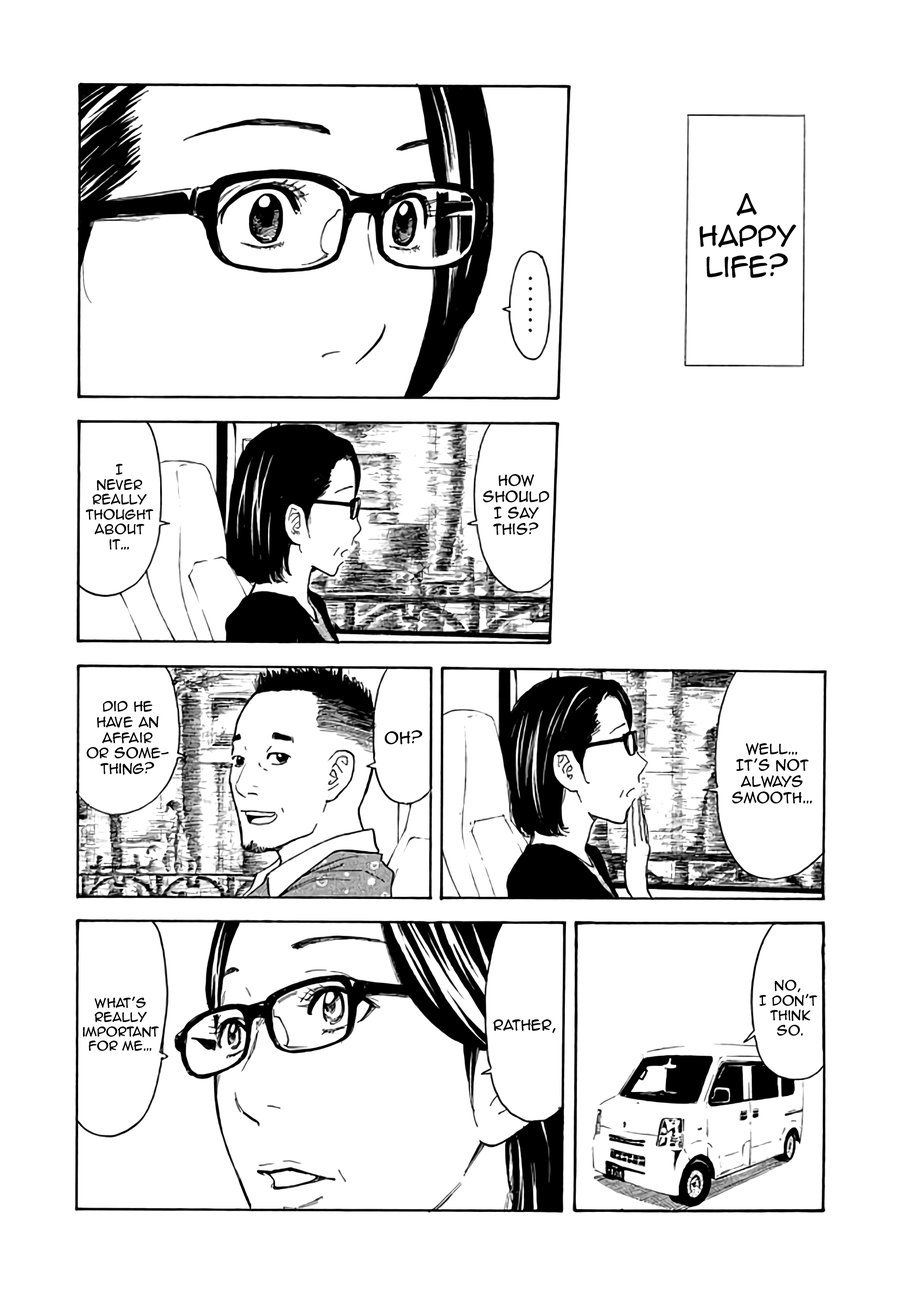
<style>
.page{position:relative;width:916px;height:1302px;background:#ffffff}
.page>*{position:absolute;margin:0}
.t1{font:26px "AnimeAce2.0BB";color:#000000}
.t2{font:12.5px "AnimeAce2.0BB";color:#000000}
.t3{font:13.6px "AnimeAce2.0BB";color:#000000}
.t4{font:13px "AnimeAce2.0BB";color:#000000}
.t5{font:15.2px "AnimeAce2.0BB";color:#000000}
.t6{font:11.9px "AnimeAce2.0BB";color:#000000}
</style>
<div class="page">
<p class="t1" style="left:699px;top:193px;width:97px;height:85px;text-align:center">A<br>happy<br>life?</p>
<p class="t2" style="left:86px;top:464px;width:68px;height:86px;text-align:center">I<br>never<br>really<br>thought<br>about<br>it…</p>
<p class="t3" style="left:483px;top:474px;width:66px;height:61px;text-align:center">How<br>should<br>I say<br>this?</p>
<p class="t4" style="left:86px;top:701px;width:83px;height:74px;text-align:center">Did he<br>have an<br>affair<br>or some-<br>thing?</p>
<p class="t5" style="left:385px;top:730px;width:37px;height:14px">Oh?</p>
<p class="t3" style="left:732px;top:743px;width:80px;height:60px;text-align:center">Well…<br>It’s not<br>always<br>smooth…</p>
<p class="t2" style="left:759px;top:980px;width:58px;height:56px;text-align:center">no,<br>I don’t<br> think<br> so.</p>
<p class="t6" style="left:83px;top:997px;width:76px;height:54px;text-align:center">What’s<br>really<br>important<br>for me…</p>
<p class="t3" style="left:493px;top:1019px;width:63px;height:14px">rather,</p>
</div>
